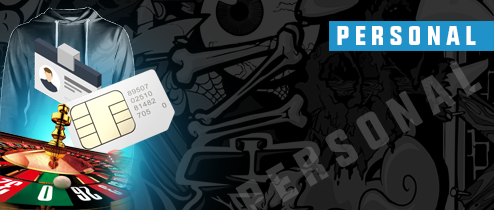
<style>
.page{position:relative;width:494px;height:210px}
.page>*{position:absolute;margin:0}
.t1{font:27px "UpboltersNew";letter-spacing:0.18em;color:#ffffff;text-transform:uppercase}
</style>
<div class="page">
<p class="t1" style="left:337px;top:26px;width:139px;height:19px">Personal</p>
</div>
